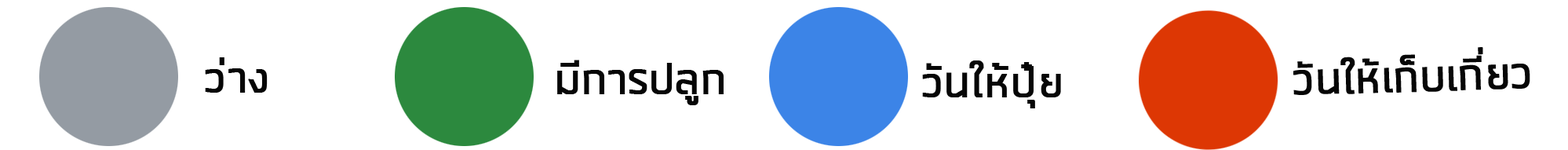
<style>
.page{position:relative;width:1568px;height:150px;background:#ffffff}
.page>*{position:absolute;margin:0}
.t1{font:56.5px "FCActiveRegular";color:#060606;font-weight:bold}
</style>
<div class="page">
<p class="t1" style="left:1293px;top:47px;width:237px;height:48px;rotate:-2deg">วันให้เก็บเกี่ยว</p>
<p class="t1" style="left:205px;top:57px;width:63px;height:36px">ว่าง</p>
<p class="t1" style="left:557px;top:60px;width:167px;height:45px">มีการปลูก</p>
<p class="t1" style="left:922px;top:60px;width:139px;height:48px">วันให้ปุ๋ย</p>
</div>
